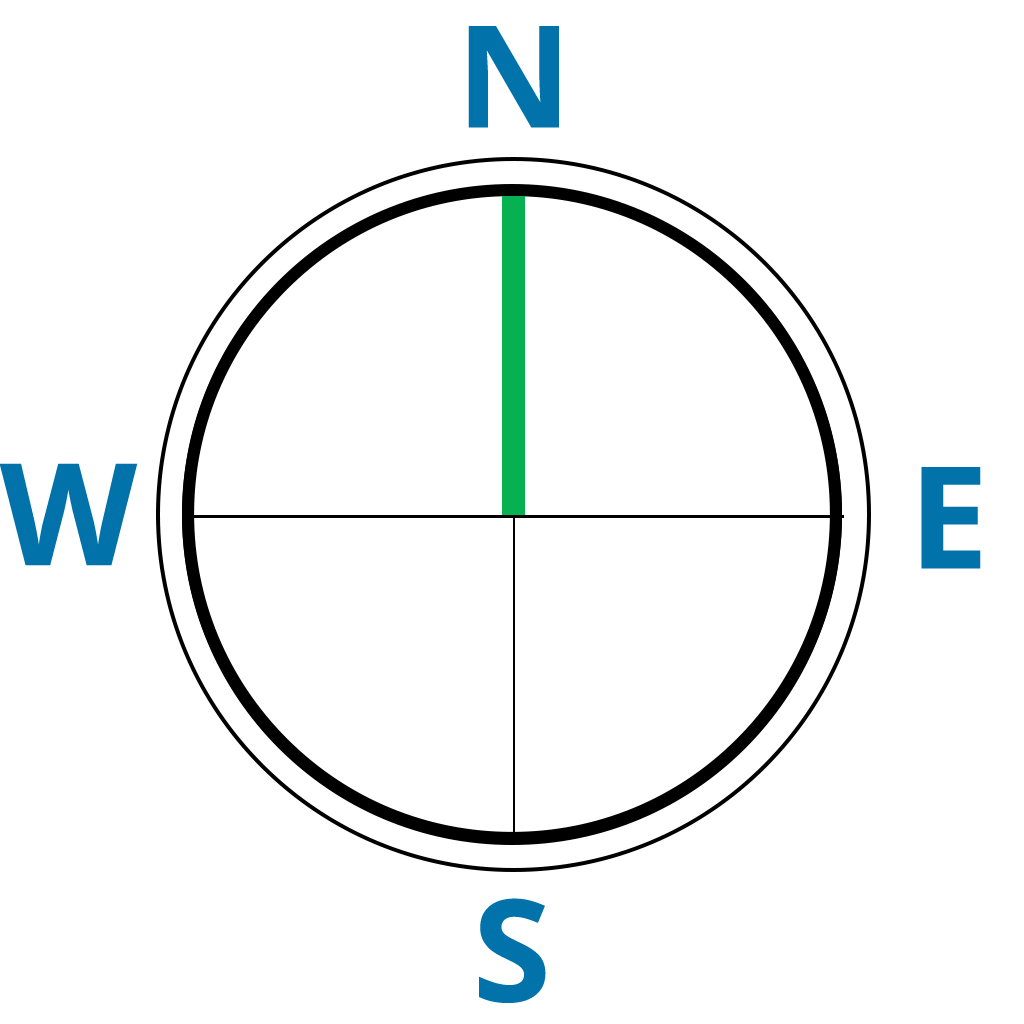
<style>
.page{position:relative;width:1024px;height:1024px;background:#ffffff}
.page>*{position:absolute;margin:0}
.t1{font:142px "OpenSans-Bold";color:#0173aa}
</style>
<div class="page">
<p class="t1" style="left:468px;top:26px;width:91px;height:102px">N</p>
<p class="t1" style="left:0px;top:463px;width:138px;height:103px">W</p>
<p class="t1" style="left:921px;top:467px;width:60px;height:102px">E</p>
<p class="t1" style="left:479px;top:898px;width:67px;height:105px">S</p>
</div>
